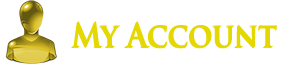
<style>
.page{position:relative;width:283px;height:64px;background:#ffffff}
.page>*{position:absolute;margin:0}
.t1{font:33.1px "TrajanPro-Bold";color:#e5d800;scale:0.88 1}
</style>
<div class="page">
<p class="t1" style="left:71px;top:22px;width:205px;height:27px">My Account</p>
<p class="t1" style="left:72px;top:21px;width:205px;height:27px">My Account</p>
</div>
